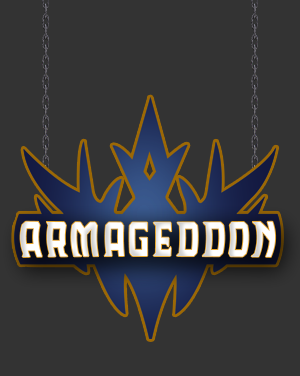
<style>
.page{position:relative;width:300px;height:376px;background:#333333}
.page>*{position:absolute;margin:0}
.t1{font:51.2px "Lorde-Havana";letter-spacing:0.1em;color:#ffffff;scale:0.75 1}
</style>
<div class="page">
<p class="t1" style="left:20px;top:221px;width:256px;height:36px">ARMAGEDDON</p>
<p class="t1" style="left:20px;top:221px;width:256px;height:36px">ARMAGEDDON</p>
</div>
